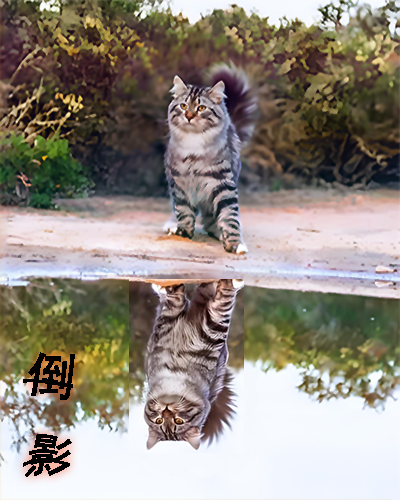
<style>
.page{position:relative;width:400px;height:500px}
.page>*{position:absolute;margin:0}
.t1{font:48px "SimHei";color:#040404;font-style:italic}
</style>
<div class="page">
<p class="t1" style="left:23px;top:352px;width:52px;height:125px">倒影</p>
</div>
